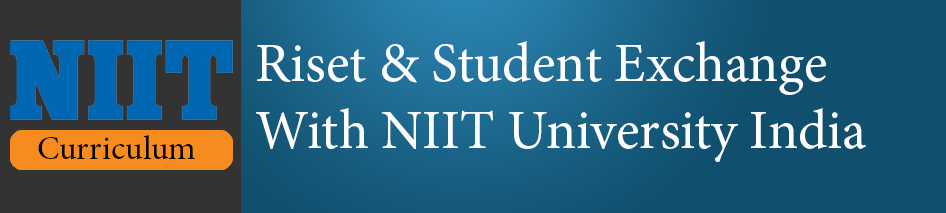
<style>
.page{position:relative;width:946px;height:213px}
.page>*{position:absolute;margin:0}
.t1{font:55.6px "MinionPro-Regular";color:#fbfdfe}
.t2{font:33.3px "MinionPro-Regular";color:#030200}
</style>
<div class="page">
<p class="t1" style="left:256px;top:41px;width:610px;height:121px">Riset &amp; Student Exchange <br>With NIIT University India</p>
<p class="t2" style="left:38px;top:135px;width:157px;height:25px">Curriculum</p>
</div>
